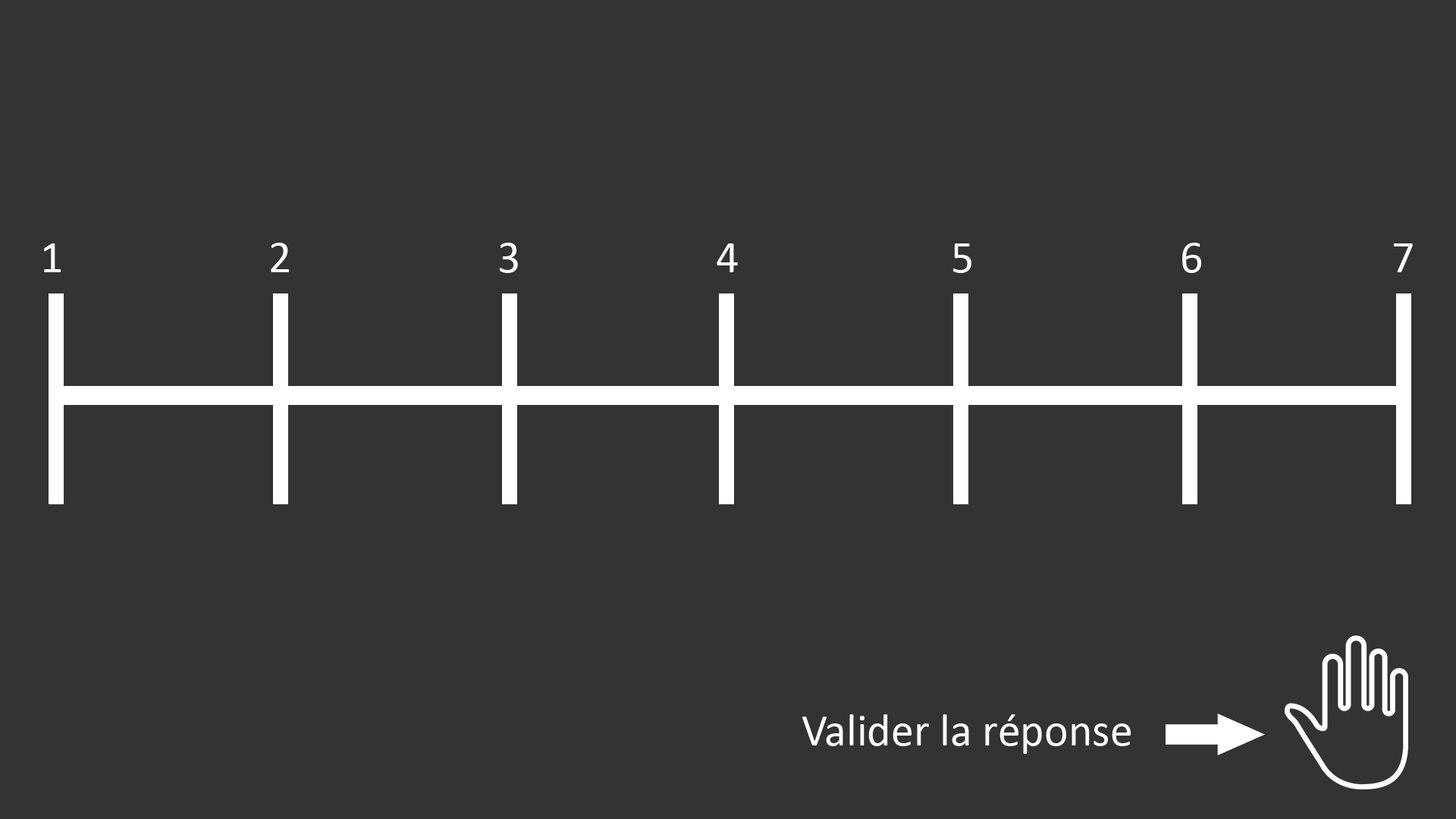
<style>
.page{position:relative;width:1456px;height:819px;background:#333333}
.page>*{position:absolute;margin:0}
.t1{font:45.5px "Calibri";color:#ffffff}
</style>
<div class="page">
<p class="t1" style="left:44px;top:243px;width:1369px;height:30px">1         2          3          4          5          6           7</p>
<p class="t1" style="left:802px;top:714px;width:329px;height:40px">Valider la réponse</p>
</div>
